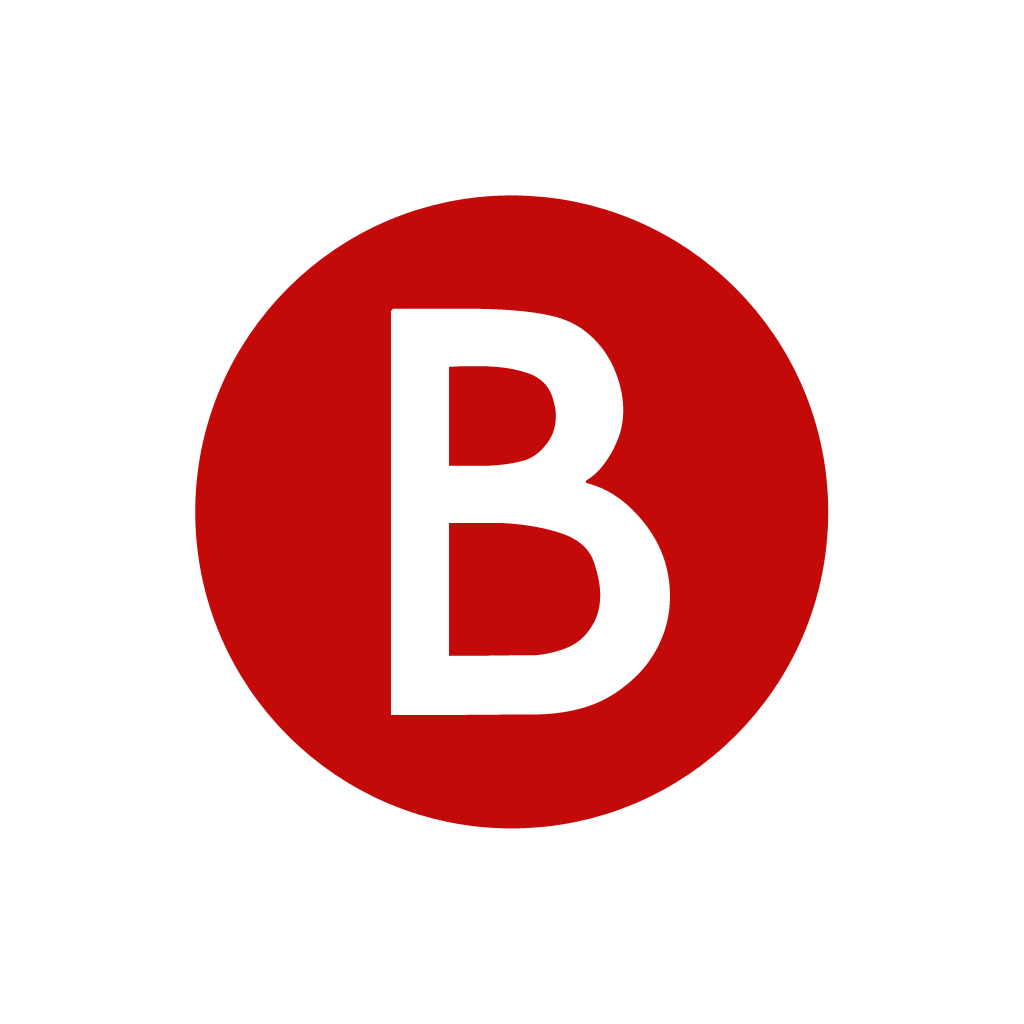
<style>
.page{position:relative;width:1024px;height:1024px;background:#ffffff}
.page>*{position:absolute;margin:0}
.t1{font:615.4px "P22JohnstonUnderground";color:#ffffff}
</style>
<div class="page">
<p class="t1" style="left:391px;top:308px;width:279px;height:407px">B</p>
</div>
